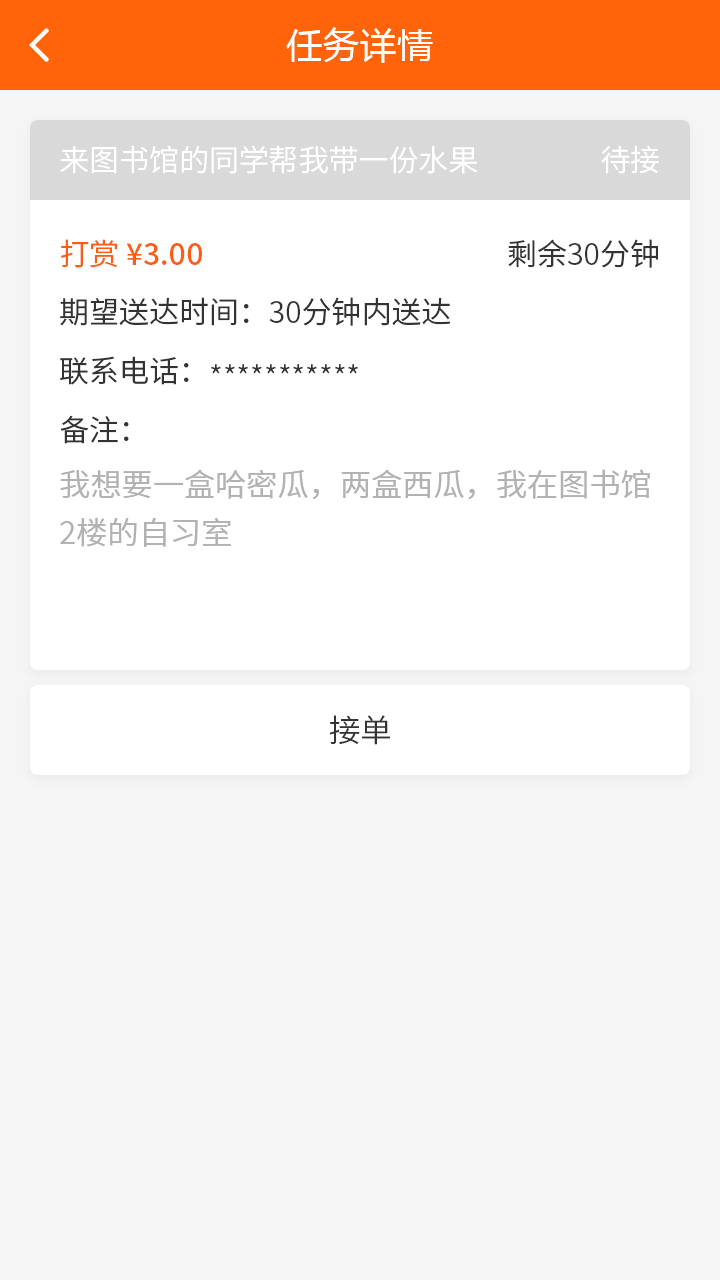
<style>
.page{position:relative;width:720px;height:1280px;background:#f5f5f5}
.page>*{position:absolute;margin:0}
.t1{font:36px "MicrosoftYaHei";letter-spacing:0.03em;color:#ffffff}
.t2{font:30px "NotoSansCJKsc-DemiLight";color:#ffffff}
.t3{font:30px "NotoSansCJKsc-Medium";color:#fb5d15}
.t4{font:30px "NotoSansCJKsc-DemiLight";color:#fb5d15}
.t5{font:30px "NotoSansCJKsc-DemiLight";color:#333333}
.t6{font:31.2px/48px "NotoSansCJKsc-DemiLight";color:#b2b2b2}
.t7{font:32px "NotoSansCJKsc-DemiLight";color:#333333}
</style>
<div class="page">
<p class="t1" style="left:286px;top:27px;width:147px;height:36px">任务详情</p>
<p class="t2" style="left:60px;top:145px;width:418px;height:29px">来图书馆的同学帮我带一份水果</p>
<p class="t2" style="left:601px;top:145px;width:58px;height:29px">待接</p>
<p class="t3" style="left:61px;top:239px;width:141px;height:29px"><span class="t4">打赏 </span>¥3.00</p>
<p class="t5" style="left:508px;top:239px;width:150px;height:29px">剩余30分钟</p>
<p class="t5" style="left:60px;top:297px;width:391px;height:29px">期望送达时间：30分钟内送达</p>
<p class="t5" style="left:60px;top:356px;width:298px;height:29px">联系电话：***********</p>
<p class="t5" style="left:60px;top:415px;width:69px;height:29px">备注：</p>
<p class="t6" style="left:60px;top:469px;width:590px;height:78px">我想要一盒哈密瓜，两盒西瓜，我在图书馆2楼的自习室</p>
<p class="t7" style="left:329px;top:715px;width:61px;height:30px">接单</p>
</div>
